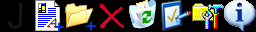
<style>
.page{position:relative;width:256px;height:32px;background:#000000}
.page>*{position:absolute;margin:0}
.t1{font:36px "ArialMT";color:#171515}
</style>
<div class="page">
<p class="t1" style="left:7px;top:3px;width:16px;height:26px">J</p>
</div>
